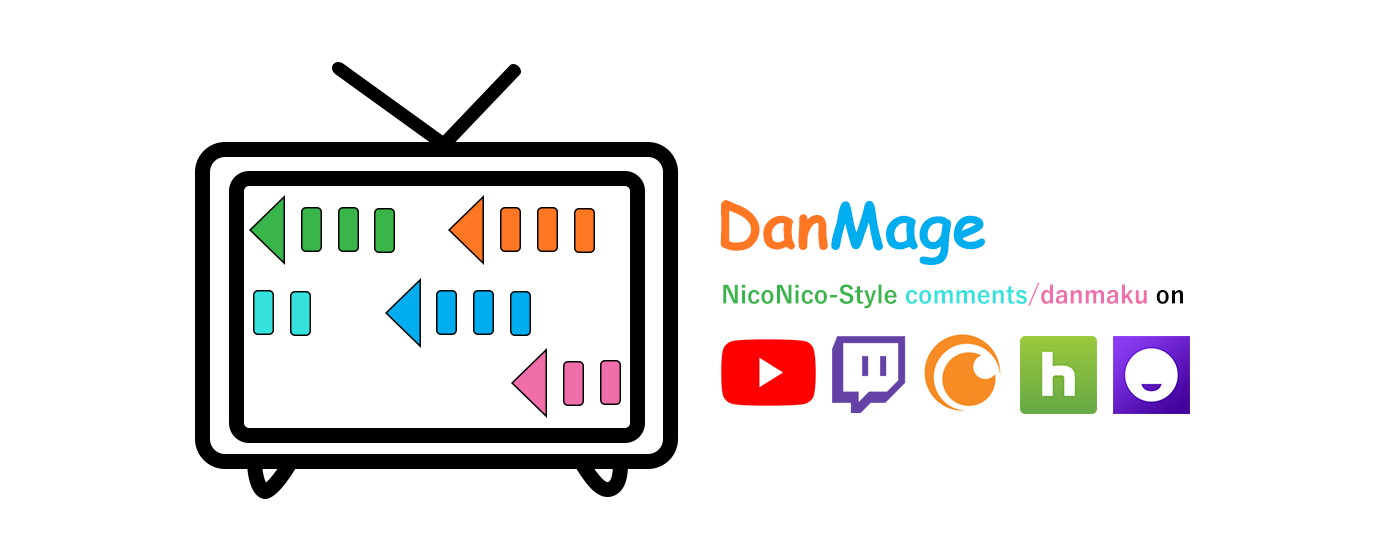
<style>
.page{position:relative;width:1400px;height:560px;background:#ffffff}
.page>*{position:absolute;margin:0}
.t1{font:62.6px "ComicSansMS-Bold";color:#00aeef}
.t2{font:62.6px "ComicSansMS-Bold";color:#ff7623}
.t3{font:24.2px "YuGothic-Bold";color:#39b54a}
.t4{font:24.2px "YuGothic-Bold";color:#36e2dc}
.t5{font:24.2px "YuGothic-Bold";color:#f06eaa}
.t6{font:24.2px "YuGothic-Bold";color:#000000}
</style>
<div class="page">
<p class="t1" style="left:720px;top:200px;width:265px;height:65px"><span class="t2">Dan</span>Mage</p>
<p class="t3" style="left:723px;top:282px;width:460px;height:27px">NicoNico-Style <span class="t4">comments</span><span class="t5">/danmaku </span><span class="t6">on</span></p>
</div>
